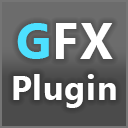
<style>
.page{position:relative;width:128px;height:128px}
.page>*{position:absolute;margin:0}
.t1{font:34px "MicrosoftTaiLe-Bold";letter-spacing:0.025em;color:#ffffff}
.t2{font:50px "MicrosoftTaiLe-Bold";letter-spacing:0.025em;color:#4de0ff}
.t3{font:50px "MicrosoftTaiLe-Bold";letter-spacing:0.025em;color:#ffffff}
</style>
<div class="page">
<p class="t1" style="left:13px;top:23px;width:103px;height:85px;text-align:center"><span class="t2">G</span><span class="t3">FX<br></span>Plugin</p>
</div>
